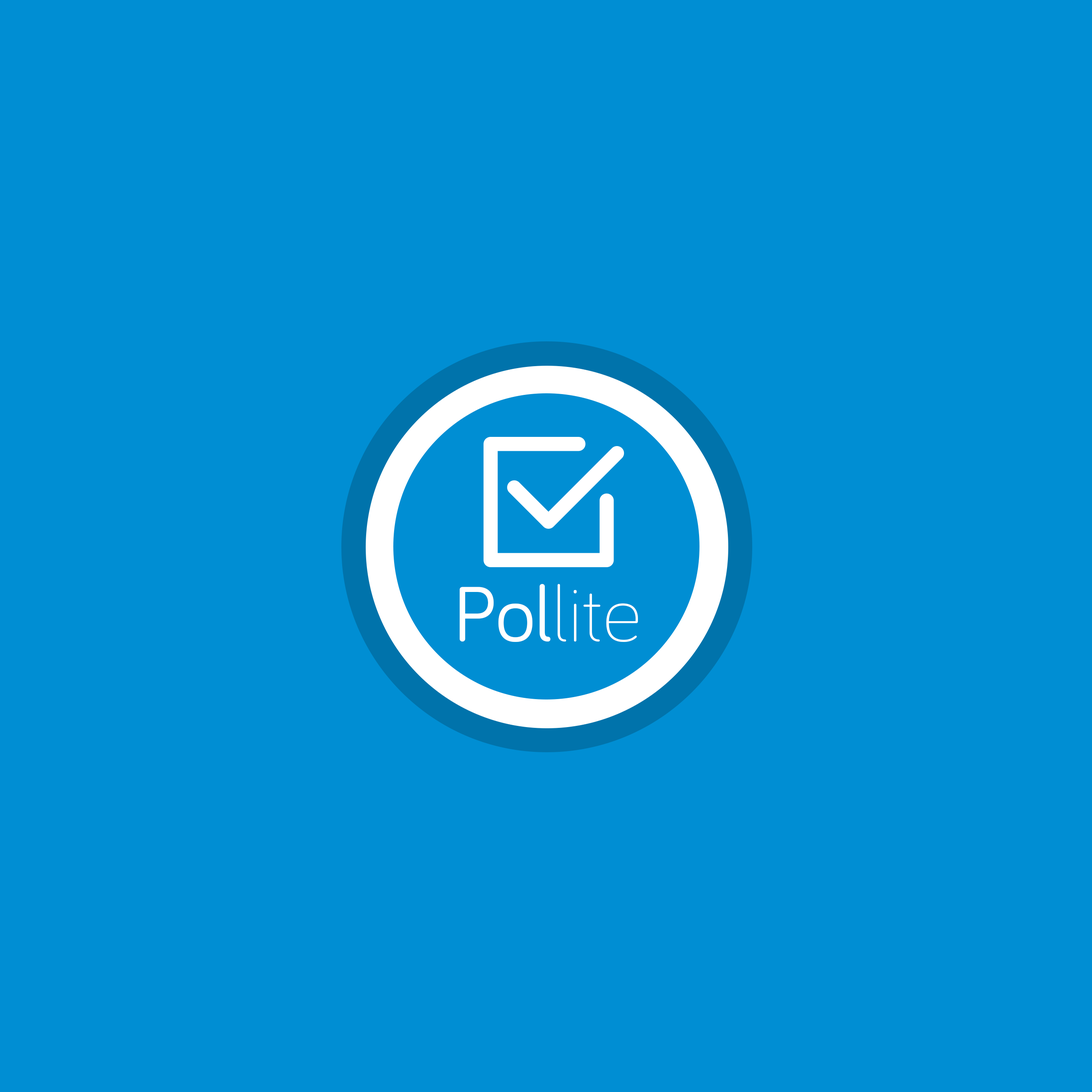
<style>
.page{position:relative;width:1092px;height:1092px;background:#008ed3}
.page>*{position:absolute;margin:0}
.t1{font:80.4px "Bariol-Light";color:#ffffff}
.t2{font:80.4px "Bariol-Regular";color:#ffffff}
</style>
<div class="page">
<p class="t1" style="left:460px;top:584px;width:178px;height:58px"><span class="t2">Pol</span>lite</p>
</div>
